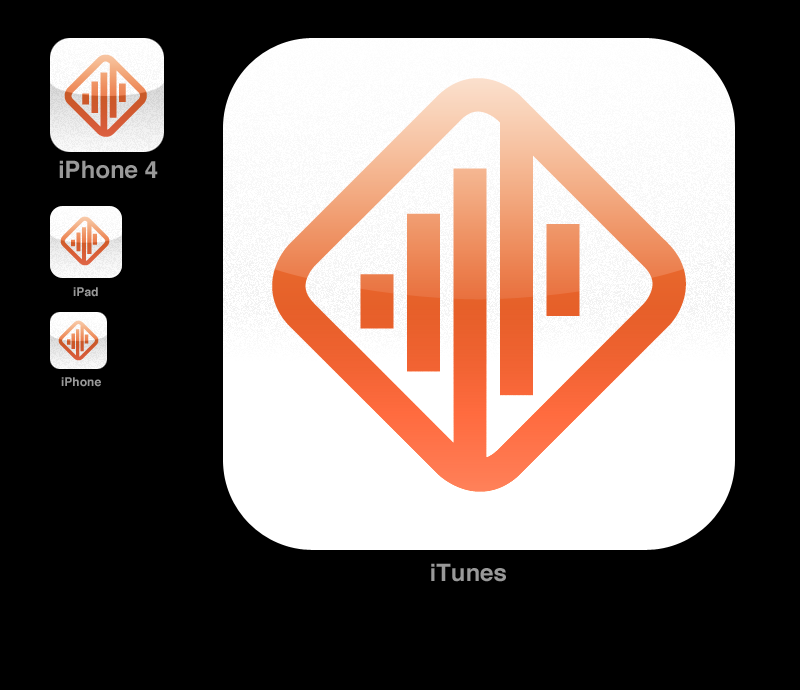
<style>
.page{position:relative;width:800px;height:690px;background:#000000}
.page>*{position:absolute;margin:0}
.t1{font:24px "Helvetica-Bold";color:#999999}
.t2{font:12px "Helvetica-Bold";color:#999999}
</style>
<div class="page">
<p class="t1" style="left:59px;top:160px;width:99px;height:19px">iPhone 4</p>
<p class="t2" style="left:73px;top:287px;width:25px;height:10px">iPad</p>
<p class="t2" style="left:61px;top:377px;width:40px;height:10px">iPhone</p>
<p class="t1" style="left:431px;top:563px;width:75px;height:19px">iTunes</p>
</div>
